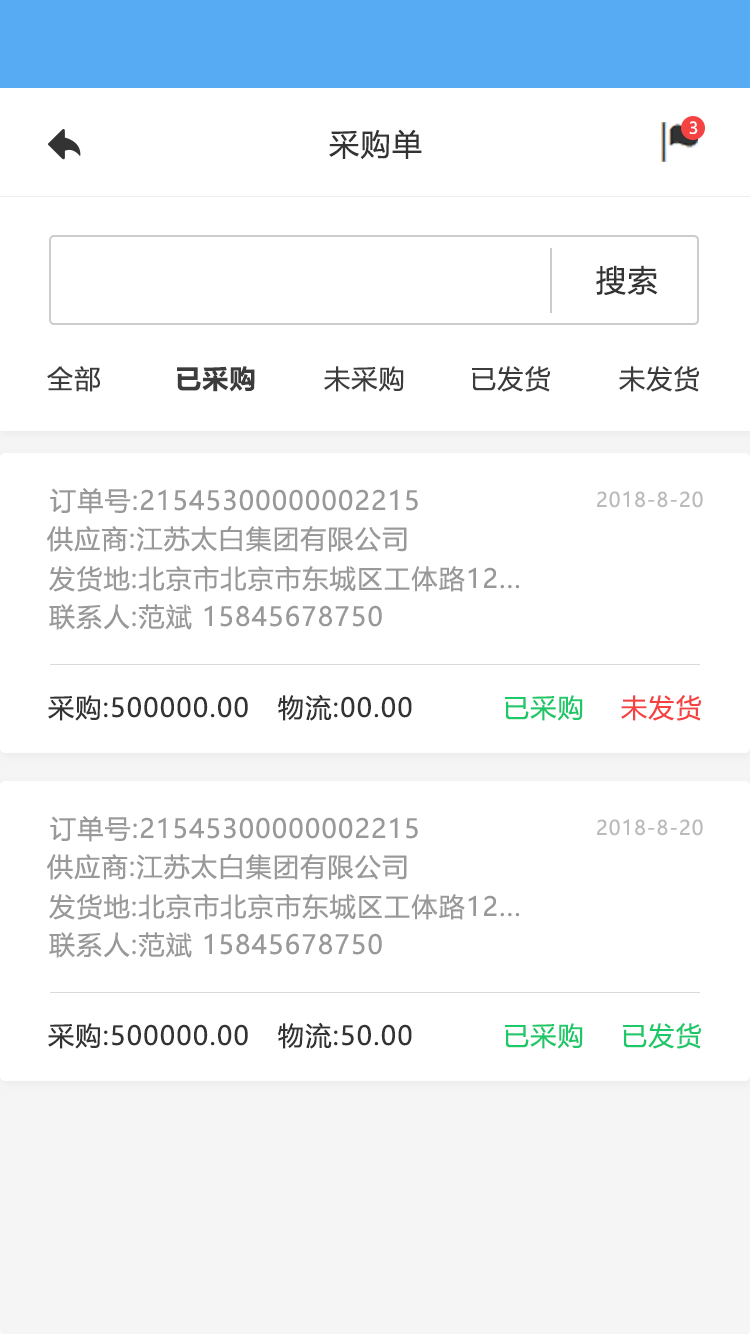
<style>
.page{position:relative;width:750px;height:1334px;background:#ffffff}
.page>*{position:absolute;margin:0}
.t1{font:16px "MicrosoftYaHeiUI";color:#ffffff}
.t2{font:30px "MicrosoftYaHeiUI";letter-spacing:0.05em;color:#333333}
.t3{font:26px "MicrosoftYaHeiUI";letter-spacing:0.05em;color:#3c3c3c}
.t4{font:26px "MicrosoftYaHeiUI-Bold";letter-spacing:0.05em;color:#3c3c3c}
.t5{font:26px "MicrosoftYaHeiUI";letter-spacing:0.05em;color:#999999}
.t6{font:20px "MicrosoftYaHeiUI";letter-spacing:0.05em;color:#bbbbbb}
.t7{font:26px "MicrosoftYaHeiUI";letter-spacing:0.05em;color:#333333}
.t8{font:26px "MicrosoftYaHeiUI";letter-spacing:0.05em;color:#1dc869}
.t9{font:26px "MicrosoftYaHeiUI";letter-spacing:0.05em;color:#f54343}
</style>
<div class="page">
<p class="t1" style="left:689px;top:121px;width:9px;height:13px">3</p>
<p class="t2" style="left:329px;top:129px;width:93px;height:30px">采购单</p>
<p class="t2" style="left:596px;top:265px;width:62px;height:30px">搜索</p>
<p class="t3" style="left:47px;top:366px;width:53px;height:26px">全部</p>
<p class="t4" style="left:177px;top:366px;width:78px;height:26px">已采购</p>
<p class="t3" style="left:324px;top:366px;width:80px;height:26px">未采购</p>
<p class="t3" style="left:472px;top:366px;width:79px;height:26px">已发货</p>
<p class="t3" style="left:619px;top:366px;width:81px;height:26px">未发货</p>
<p class="t5" style="left:50px;top:488px;width:368px;height:26px">订单号:21545300000002215</p>
<p class="t6" style="left:597px;top:491px;width:106px;height:17px">2018-8-20</p>
<p class="t5" style="left:47px;top:526px;width:360px;height:26px">供应商:江苏太白集团有限公司</p>
<p class="t5" style="left:49px;top:566px;width:471px;height:26px">发货地:北京市北京市东城区工体路12...</p>
<p class="t5" style="left:49px;top:604px;width:333px;height:26px">联系人:范斌 15845678750</p>
<p class="t7" style="left:48px;top:695px;width:200px;height:26px">采购:500000.00</p>
<p class="t7" style="left:278px;top:694px;width:134px;height:27px">物流:00.00</p>
<p class="t8" style="left:505px;top:695px;width:78px;height:26px">已采购</p>
<p class="t9" style="left:621px;top:695px;width:81px;height:26px">未发货</p>
<p class="t5" style="left:50px;top:816px;width:368px;height:26px">订单号:21545300000002215</p>
<p class="t6" style="left:597px;top:819px;width:106px;height:17px">2018-8-20</p>
<p class="t5" style="left:47px;top:854px;width:360px;height:26px">供应商:江苏太白集团有限公司</p>
<p class="t5" style="left:49px;top:894px;width:471px;height:26px">发货地:北京市北京市东城区工体路12...</p>
<p class="t5" style="left:49px;top:932px;width:333px;height:26px">联系人:范斌 15845678750</p>
<p class="t7" style="left:48px;top:1023px;width:200px;height:26px">采购:500000.00</p>
<p class="t7" style="left:278px;top:1022px;width:134px;height:27px">物流:50.00</p>
<p class="t8" style="left:505px;top:1023px;width:78px;height:26px">已采购</p>
<p class="t8" style="left:623px;top:1023px;width:79px;height:26px">已发货</p>
</div>
